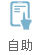
<style>
.page{position:relative;width:40px;height:55px;background:#ffffff}
.page>*{position:absolute;margin:0}
.t1{font:21.2px "SimSun";letter-spacing:0.075em;color:#666666;font-variant:small-caps}
</style>
<div class="page">
<p class="t1" style="left:9px;top:39px;width:23px;height:12px">自助</p>
</div>
